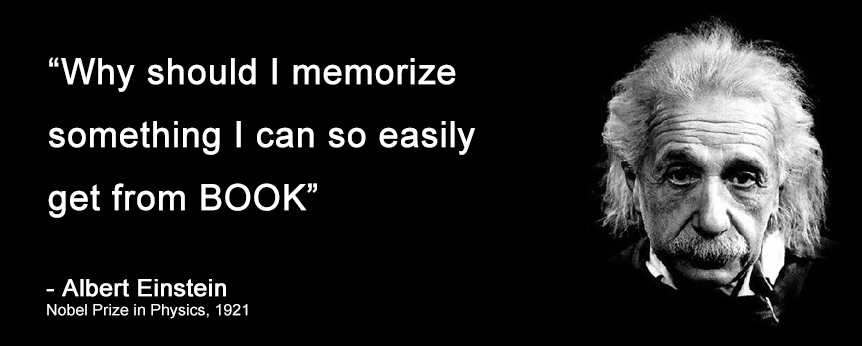
<style>
.page{position:relative;width:862px;height:346px;background:#010101}
.page>*{position:absolute;margin:0}
.t1{font:36px "ArialMT";color:#ffffff;font-weight:bold}
.t2{font:23.5px "ArialMT";color:#ffffff;font-weight:bold}
.t3{font:15.6px "ArialMT";color:#ffffff}
</style>
<div class="page">
<p class="t1" style="left:48px;top:57px;width:427px;height:161px">“Why should I memorize something I can so easily get from BOOK”</p>
<p class="t2" style="left:46px;top:279px;width:180px;height:18px">- Albert Einstein</p>
<p class="t3" style="left:47px;top:304px;width:201px;height:15px">Nobel Prize in Physics, 1921</p>
</div>
